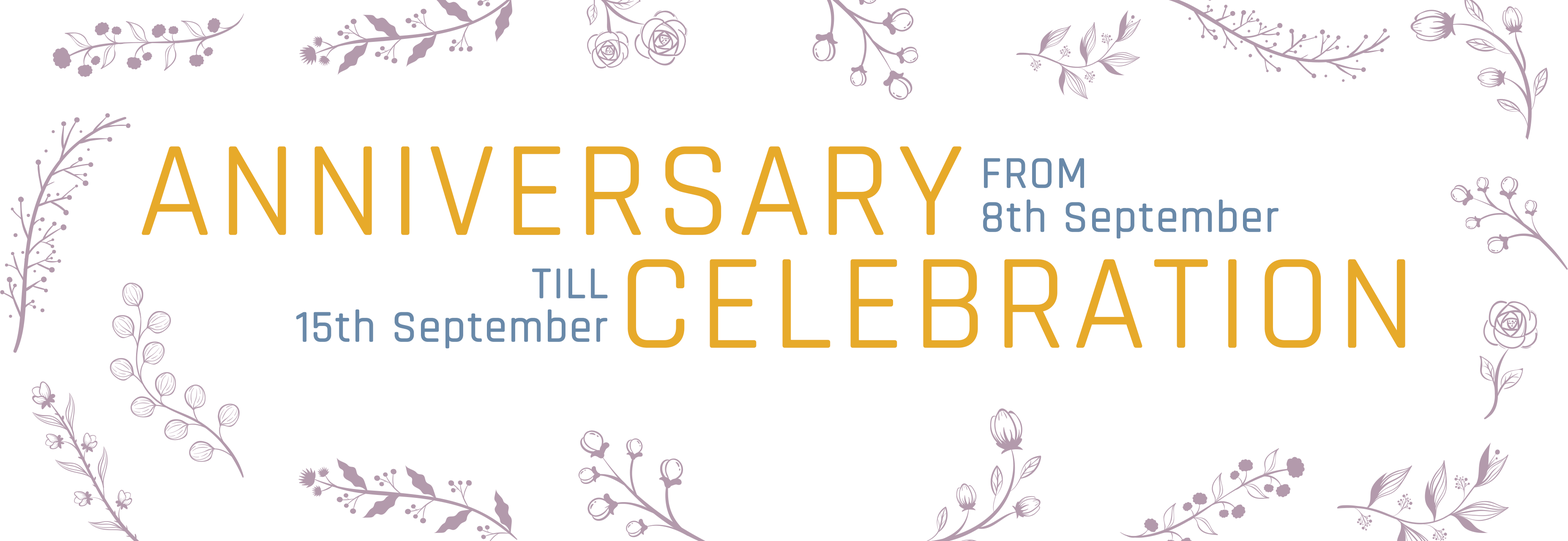
<style>
.page{position:relative;width:1568px;height:541px;background:#ffffff}
.page>*{position:absolute;margin:0}
.t1{font:135.1px "Rajdhani-Regular";letter-spacing:0.025em;color:#e7aa2a;font-weight:bold}
.t2{font:43.9px/43.6px "Rajdhani-Regular";letter-spacing:0.025em;color:#6989a9;font-weight:bold}
</style>
<div class="page">
<p class="t1" style="left:142px;top:146px;width:820px;height:89px">ANNIVERSARY</p>
<p class="t2" style="left:983px;top:158px;width:295px;height:81px">FROM<br>8th September</p>
<p class="t2" style="left:296px;top:268px;width:312px;height:81px;text-align:right">TILL<br>15th September</p>
<p class="t1" style="left:628px;top:259px;width:777px;height:89px">CELEBRATION</p>
</div>
